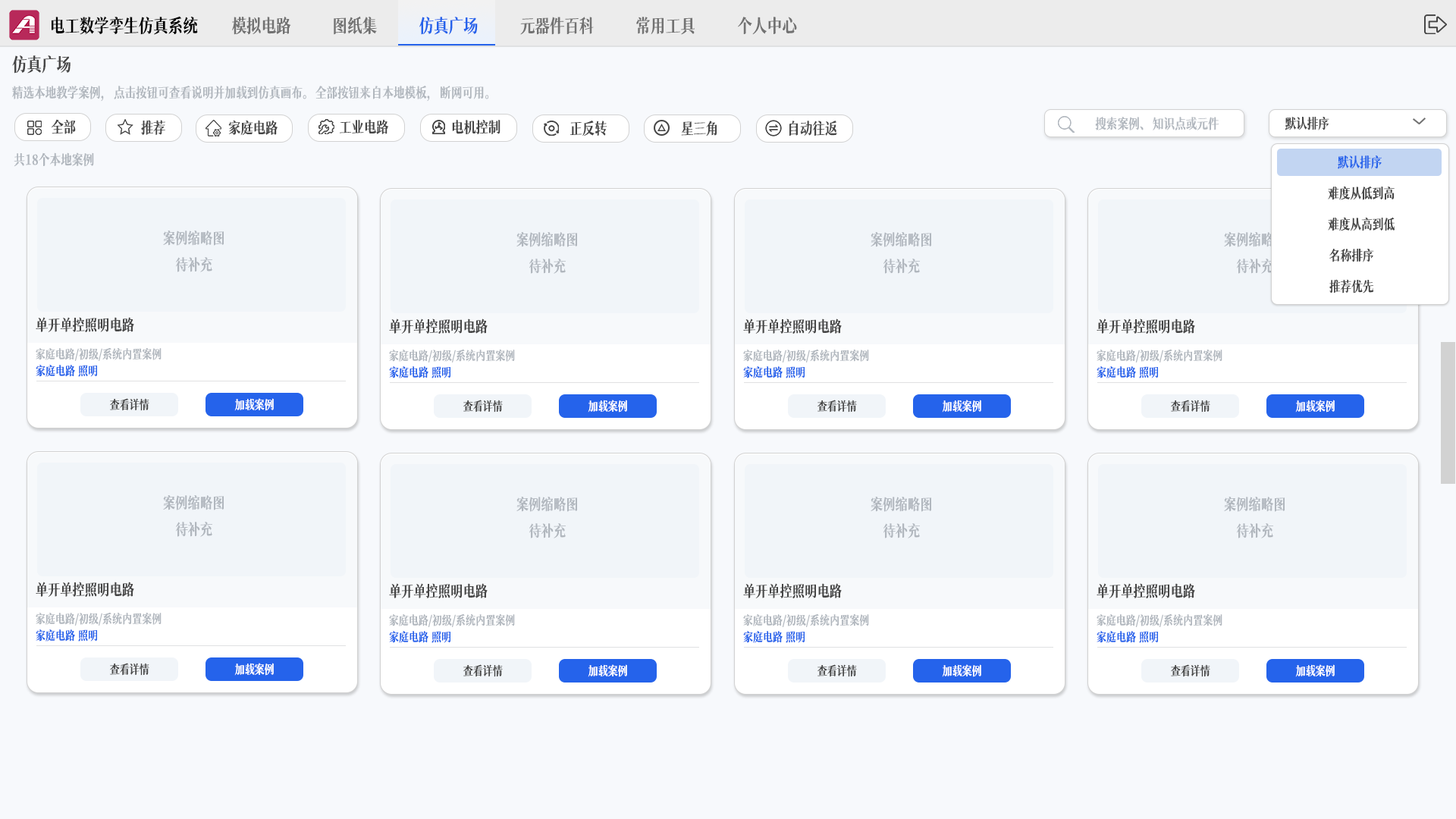
<style>
.page{position:relative;width:1456px;height:819px;background:#f7f9fc}
.page>*{position:absolute;margin:0}
.t1{font:18.2px "MaoKenWangFengYaSong";color:#020202}
.t2{font:18.2px "MaoKenWangFengYaSong";color:#727272}
.t3{font:18.2px "MaoKenWangFengYaSong";color:#2563eb}
.t4{font:18.2px "MaoKenWangFengYaSong";color:#464646}
.t5{font:13.6px "MaoKenWangFengYaSong";color:#b1b7be}
.t6{font:15.1px "MaoKenWangFengYaSong";color:#464646}
.t7{font:15.2px "MaoKenWangFengYaSong";color:#464646}
.t8{font:15px "MaoKenWangFengYaSong";color:#464646}
.t9{font:15.6px "MaoKenWangFengYaSong";color:#464646}
.t10{font:13.6px "MaoKenWangFengYaSong";color:#464646}
.t11{font:13.6px "MaoKenWangFengYaSong";color:#2563eb}
.t12{font:15.2px "MaoKenWangFengYaSong";color:#b1b7be}
.t13{font:12.1px "MaoKenWangFengYaSong";color:#b1b7be}
.t14{font:12.1px "MaoKenWangFengYaSong";color:#2563eb}
.t15{font:12.1px "MaoKenWangFengYaSong";color:#464646}
.t16{font:12.1px "MaoKenWangFengYaSong";color:#ffffff}
</style>
<div class="page">
<p class="t1" style="left:52px;top:16px;width:146px;height:19px">电工数学孪生仿真系统</p>
<p class="t2" style="left:232px;top:17px;width:59px;height:18px">模拟电路</p>
<p class="t2" style="left:334px;top:16px;width:43px;height:19px">图纸集</p>
<p class="t3" style="left:419px;top:17px;width:59px;height:18px">仿真广场</p>
<p class="t2" style="left:520px;top:17px;width:74px;height:18px">元器件百科</p>
<p class="t2" style="left:636px;top:17px;width:59px;height:18px">常用工具</p>
<p class="t2" style="left:738px;top:17px;width:59px;height:18px">个人中心</p>
<p class="t4" style="left:12px;top:55px;width:59px;height:19px">仿真广场</p>
<p class="t5" style="left:12px;top:86px;width:477px;height:16px">精选本地教学案例，点击按钮可查看说明并加载到仿真画布。全部按钮来自本地模板，断网可用。</p>
<p class="t6" style="left:52px;top:119px;width:24px;height:15px">全部</p>
<p class="t7" style="left:141px;top:120px;width:24px;height:15px">推荐</p>
<p class="t6" style="left:228px;top:120px;width:50px;height:16px">家庭电路</p>
<p class="t6" style="left:339px;top:119px;width:50px;height:15px">工业电路</p>
<p class="t8" style="left:452px;top:120px;width:48px;height:14px">电机控制</p>
<p class="t9" style="left:570px;top:121px;width:37px;height:15px">正反转</p>
<p class="t9" style="left:681px;top:121px;width:36px;height:15px">星三角</p>
<p class="t9" style="left:789px;top:121px;width:48px;height:15px">自动往返</p>
<p class="t5" style="left:1095px;top:117px;width:124px;height:13px">搜索案例、知识点或元件</p>
<p class="t10" style="left:1285px;top:117px;width:44px;height:13px">默认排序</p>
<p class="t5" style="left:14px;top:152px;width:80px;height:15px">共18个本地案例</p>
<p class="t11" style="left:1338px;top:155px;width:44px;height:14px">默认排序</p>
<p class="t10" style="left:1328px;top:186px;width:67px;height:14px">难度从低到高</p>
<p class="t10" style="left:1328px;top:217px;width:67px;height:14px">难度从高到低</p>
<p class="t12" style="left:163px;top:231px;width:61px;height:41px;text-align:center">案例缩略图<br>待补充</p>
<p class="t12" style="left:516px;top:232px;width:61px;height:42px;text-align:center">案例缩略图<br>待补充</p>
<p class="t12" style="left:871px;top:232px;width:60px;height:42px;text-align:center">案例缩略图<br>待补充</p>
<p class="t12" style="left:1224px;top:232px;width:61px;height:42px;text-align:center">案例缩略图<br>待补充</p>
<p class="t10" style="left:1329px;top:248px;width:45px;height:14px">名称排序</p>
<p class="t10" style="left:1329px;top:279px;width:45px;height:14px">推荐优先</p>
<p class="t7" style="left:36px;top:317px;width:98px;height:15px">单开单控照明电路</p>
<p class="t7" style="left:389px;top:318px;width:99px;height:16px">单开单控照明电路</p>
<p class="t7" style="left:743px;top:318px;width:99px;height:16px">单开单控照明电路</p>
<p class="t7" style="left:1097px;top:318px;width:98px;height:16px">单开单控照明电路</p>
<p class="t13" style="left:36px;top:347px;width:126px;height:14px">家庭电路/初级/系统内置案例</p>
<p class="t13" style="left:389px;top:349px;width:126px;height:13px">家庭电路/初级/系统内置案例</p>
<p class="t13" style="left:743px;top:349px;width:126px;height:13px">家庭电路/初级/系统内置案例</p>
<p class="t13" style="left:1097px;top:349px;width:125px;height:13px">家庭电路/初级/系统内置案例</p>
<p class="t14" style="left:36px;top:365px;width:61px;height:12px">家庭电路 照明</p>
<p class="t14" style="left:389px;top:366px;width:61px;height:12px">家庭电路 照明</p>
<p class="t14" style="left:743px;top:366px;width:62px;height:12px">家庭电路 照明</p>
<p class="t14" style="left:1097px;top:366px;width:61px;height:12px">家庭电路 照明</p>
<p class="t15" style="left:110px;top:398px;width:39px;height:13px">查看详情</p>
<p class="t16" style="left:234px;top:398px;width:40px;height:13px">加载案例</p>
<p class="t15" style="left:463px;top:400px;width:40px;height:13px">查看详情</p>
<p class="t16" style="left:588px;top:400px;width:39px;height:13px">加载案例</p>
<p class="t15" style="left:817px;top:400px;width:40px;height:13px">查看详情</p>
<p class="t16" style="left:942px;top:400px;width:39px;height:13px">加载案例</p>
<p class="t15" style="left:1171px;top:400px;width:39px;height:13px">查看详情</p>
<p class="t16" style="left:1295px;top:400px;width:40px;height:13px">加载案例</p>
<p class="t12" style="left:163px;top:495px;width:61px;height:42px;text-align:center">案例缩略图<br>待补充</p>
<p class="t12" style="left:516px;top:497px;width:61px;height:41px;text-align:center">案例缩略图<br>待补充</p>
<p class="t12" style="left:871px;top:497px;width:60px;height:41px;text-align:center">案例缩略图<br>待补充</p>
<p class="t12" style="left:1224px;top:497px;width:61px;height:41px;text-align:center">案例缩略图<br>待补充</p>
<p class="t7" style="left:36px;top:582px;width:98px;height:15px">单开单控照明电路</p>
<p class="t7" style="left:389px;top:583px;width:99px;height:15px">单开单控照明电路</p>
<p class="t7" style="left:743px;top:583px;width:99px;height:15px">单开单控照明电路</p>
<p class="t7" style="left:1097px;top:583px;width:98px;height:15px">单开单控照明电路</p>
<p class="t13" style="left:36px;top:612px;width:126px;height:14px">家庭电路/初级/系统内置案例</p>
<p class="t13" style="left:389px;top:613px;width:126px;height:14px">家庭电路/初级/系统内置案例</p>
<p class="t13" style="left:743px;top:613px;width:126px;height:14px">家庭电路/初级/系统内置案例</p>
<p class="t13" style="left:1097px;top:613px;width:125px;height:14px">家庭电路/初级/系统内置案例</p>
<p class="t14" style="left:36px;top:629px;width:61px;height:13px">家庭电路 照明</p>
<p class="t14" style="left:389px;top:631px;width:61px;height:12px">家庭电路 照明</p>
<p class="t14" style="left:743px;top:631px;width:62px;height:12px">家庭电路 照明</p>
<p class="t14" style="left:1097px;top:631px;width:61px;height:12px">家庭电路 照明</p>
<p class="t15" style="left:110px;top:663px;width:39px;height:13px">查看详情</p>
<p class="t16" style="left:234px;top:663px;width:40px;height:13px">加载案例</p>
<p class="t15" style="left:463px;top:664px;width:40px;height:13px">查看详情</p>
<p class="t16" style="left:588px;top:664px;width:39px;height:13px">加载案例</p>
<p class="t15" style="left:817px;top:664px;width:40px;height:13px">查看详情</p>
<p class="t16" style="left:942px;top:664px;width:39px;height:13px">加载案例</p>
<p class="t15" style="left:1171px;top:664px;width:39px;height:13px">查看详情</p>
<p class="t16" style="left:1295px;top:664px;width:40px;height:13px">加载案例</p>
</div>
